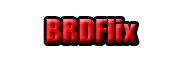
<style>
.page{position:relative;width:187px;height:60px;background:#ffffff}
.page>*{position:absolute;margin:0}
.t1{font:30px "Impact"}
</style>
<div class="page">
<p class="t1" style="left:46px;top:19px;width:91px;height:24px">BRDFlix</p>
</div>
